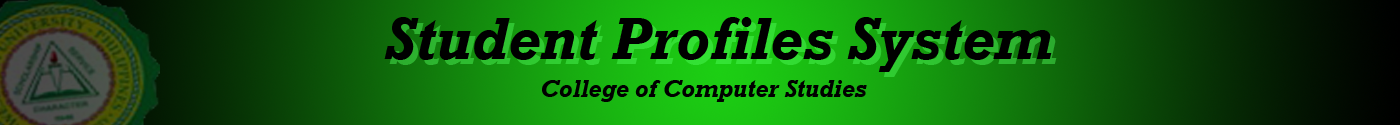
<style>
.page{position:relative;width:1400px;height:125px}
.page>*{position:absolute;margin:0}
.t1{font:60px "Rockwell-BoldItalic";color:#000000}
.t2{font:60px "Rockwell-BoldItalic"}
.t3{font:24px "Rockwell-BoldItalic";color:#000000}
</style>
<div class="page">
<p class="t1" style="left:384px;top:17px;width:668px;height:55px">Student Profiles System</p>
<p class="t2" style="left:389px;top:22px;width:668px;height:55px">Student Profiles System</p>
<p class="t3" style="left:542px;top:80px;width:325px;height:22px">College of Computer Studies</p>
</div>
